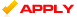
<style>
.page{position:relative;width:77px;height:17px;background:#ffffff}
.page>*{position:absolute;margin:0}
.t1{font:12.5px "MicrogrammaD-BoldExte";letter-spacing:-0.015em;color:#f80808}
</style>
<div class="page">
<p class="t1" style="left:19px;top:4px;width:56px;height:9px">APPLY</p>
</div>
